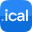
<style>
.page{position:relative;width:32px;height:32px;background:#2787f5}
.page>*{position:absolute;margin:0}
.t1{font:16px "VKSansDisplay-DemiBold";letter-spacing:-0.03em;color:#fafafa}
.t2{font:16px "VKSansDisplay-DemiBold";letter-spacing:-0.03em;color:#80bbff}
</style>
<div class="page">
<p class="t1" style="left:1px;top:9px;width:27px;height:13px"><span class="t2">.</span>ical</p>
</div>
